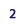
<style>
.page{position:relative;width:25px;height:24px;background:#ffffff}
.page>*{position:absolute;margin:0}
.t1{font:13px "MyriadPro-Regular";color:#19196f;font-weight:bold}
</style>
<div class="page">
<p class="t1" style="left:9px;top:9px;width:7px;height:10px">2</p>
</div>
